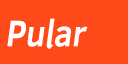
<style>
.page{position:relative;width:128px;height:64px;background:#fe4a18}
.page>*{position:absolute;margin:0}
.t1{font:37.8px "FogSansIt";color:#ffffff;scale:0.87 1}
</style>
<div class="page">
<p class="t1" style="left:7px;top:18px;width:81px;height:31px">Pular</p>
</div>
